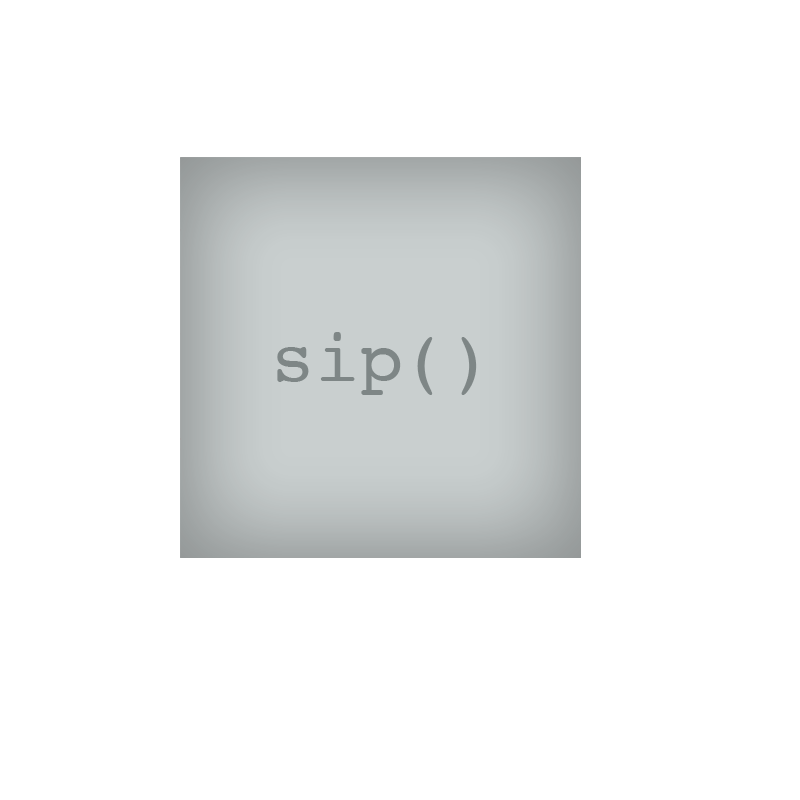
<style>
.page{position:relative;width:800px;height:800px;background:#ffffff}
.page>*{position:absolute;margin:0}
.t1{font:125.2px "Courier";color:#7e8686}
</style>
<div class="page">
<p class="t1" style="left:277px;top:332px;width:200px;height:63px">sip()</p>
</div>
